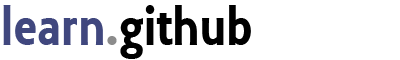
<style>
.page{position:relative;width:400px;height:60px;background:#ffffff}
.page>*{position:absolute;margin:0}
.t1{font:60px "Collegiate";color:#000000}
.t2{font:60px "Collegiate";color:#40477e}
.t3{font:60px "Collegiate";color:#8c8c8c}
</style>
<div class="page">
<p class="t1" style="left:3px;top:5px;width:248px;height:54px"><span class="t2">learn</span><span class="t3">.</span>github</p>
</div>
